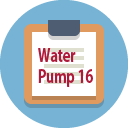
<style>
.page{position:relative;width:128px;height:128px;background:#77b3d4}
.page>*{position:absolute;margin:0}
.t1{font:17.8px "AdobeGothicStd-Bold";color:#b01a3a;scale:0.76 1}
</style>
<div class="page">
<p class="t1" style="left:38px;top:48px;width:55px;height:39px">Water <br>Pump 16</p>
</div>
